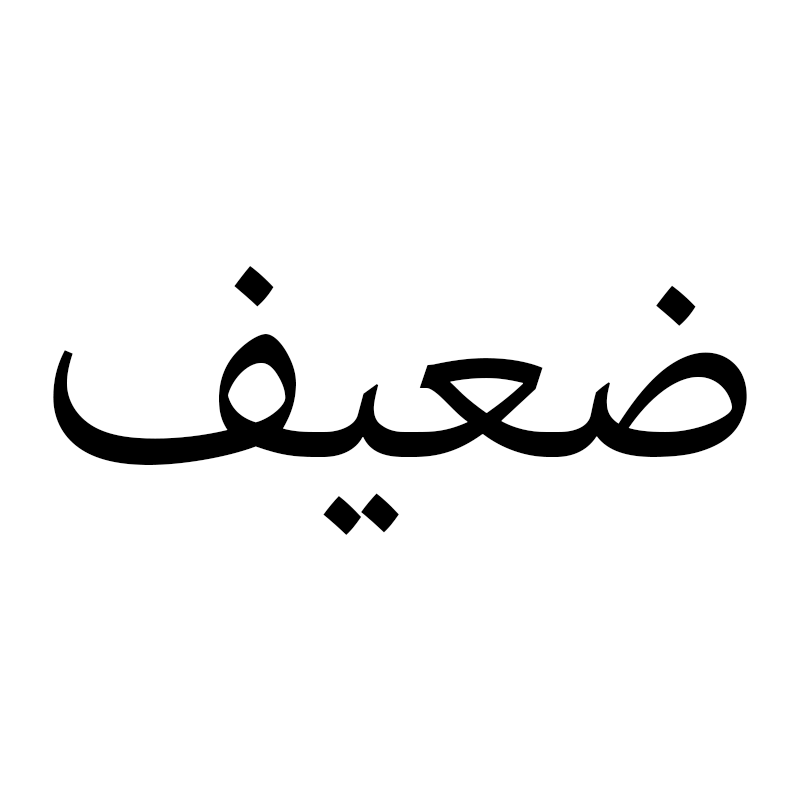
<style>
.page{position:relative;width:800px;height:800px;background:#ffffff}
.page>*{position:absolute;margin:0}
.t1{font:400px "AdobeArabic-Regular";color:#000000}
</style>
<div class="page">
<p class="t1" style="left:53px;top:266px;width:694px;height:269px">ضعیف</p>
</div>
